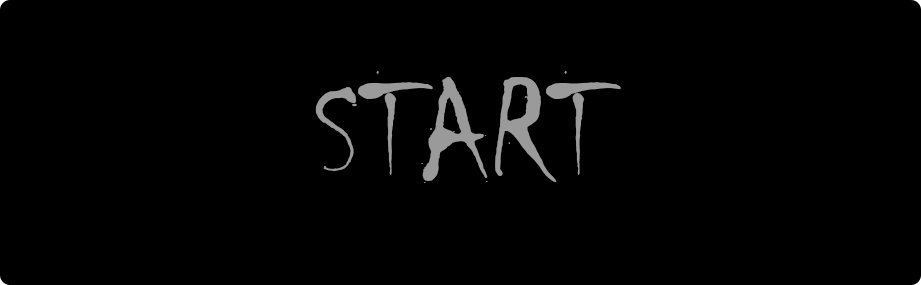
<style>
.page{position:relative;width:921px;height:285px;background:#000000}
.page>*{position:absolute;margin:0}
.t1{font:141.7px "Chiller-Regular";color:#9a9a9a}
</style>
<div class="page">
<p class="t1" style="left:315px;top:71px;width:306px;height:112px">START</p>
</div>
